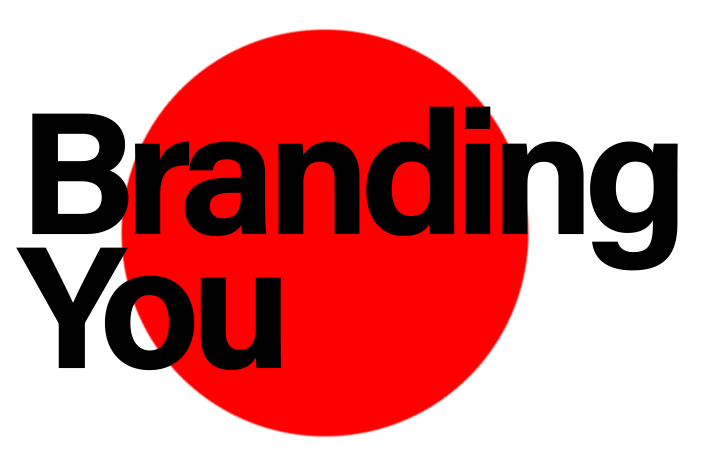
<style>
.page{position:relative;width:720px;height:470px;background:#ffffff}
.page>*{position:absolute;margin:0}
.t1{font:174.5px/134.3px "AcuminConcept-Bold";letter-spacing:-0.06em;color:#000000}
</style>
<div class="page">
<p class="t1" style="left:16px;top:106px;width:662px;height:265px">Branding<br>You</p>
</div>
